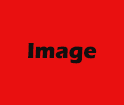
<style>
.page{position:relative;width:124px;height:105px;background:#e91010}
.page>*{position:absolute;margin:0}
.t1{font:22.2px "ErasITC-Bold";color:#110f0f}
</style>
<div class="page">
<p class="t1" style="left:28px;top:43px;width:69px;height:21px">Image</p>
</div>
